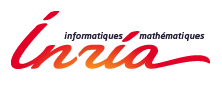
<style>
.page{position:relative;width:222px;height:95px;background:#ffffff}
.page>*{position:absolute;margin:0}
.t1{font:8.7px "NeoSans-MediumItalic";letter-spacing:0.01em;color:#241e38}
.t2{font:8.7px "NeoSans-MediumItalic";letter-spacing:0.075em;color:#241e38}
.t3{font:8.7px "NeoSans-MediumItalic";color:#241e38}
</style>
<div class="page">
<p class="t1" style="left:64px;top:32px;width:59px;height:9px">i<span class="t2">n</span>f<span class="t2">o</span><span class="t3">r</span>matiques</p>
<p class="t1" style="left:139px;top:32px;width:66px;height:9px">mathéma<span class="t2">t</span>iques</p>
</div>
